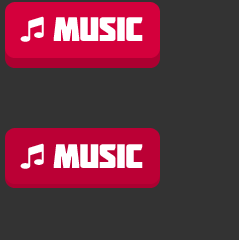
<style>
.page{position:relative;width:239px;height:240px;background:#333333}
.page>*{position:absolute;margin:0}
.t1{font:34px "Molot";letter-spacing:-0.02em;color:#ffffff}
</style>
<div class="page">
<p class="t1" style="left:53px;top:17px;width:90px;height:24px">MUSIC</p>
<p class="t1" style="left:53px;top:144px;width:90px;height:24px">MUSIC</p>
</div>
